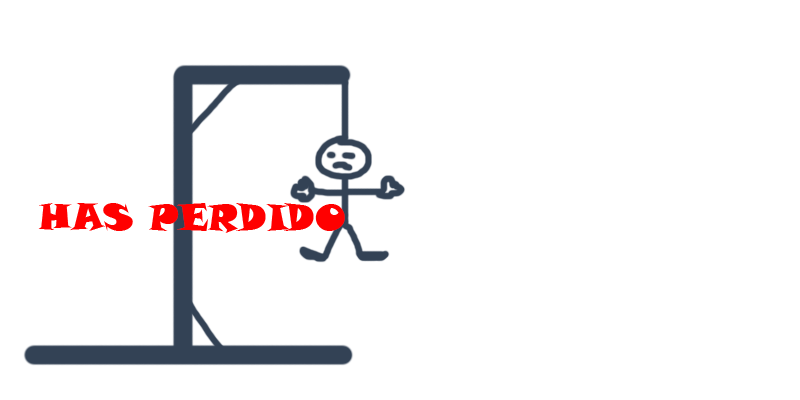
<style>
.page{position:relative;width:800px;height:400px;background:#ffffff}
.page>*{position:absolute;margin:0}
.t1{font:36.6px "SnapITC-Regular";color:#ff0000}
</style>
<div class="page">
<p class="t1" style="left:38px;top:203px;width:307px;height:30px">HAS PERDIDO</p>
</div>
